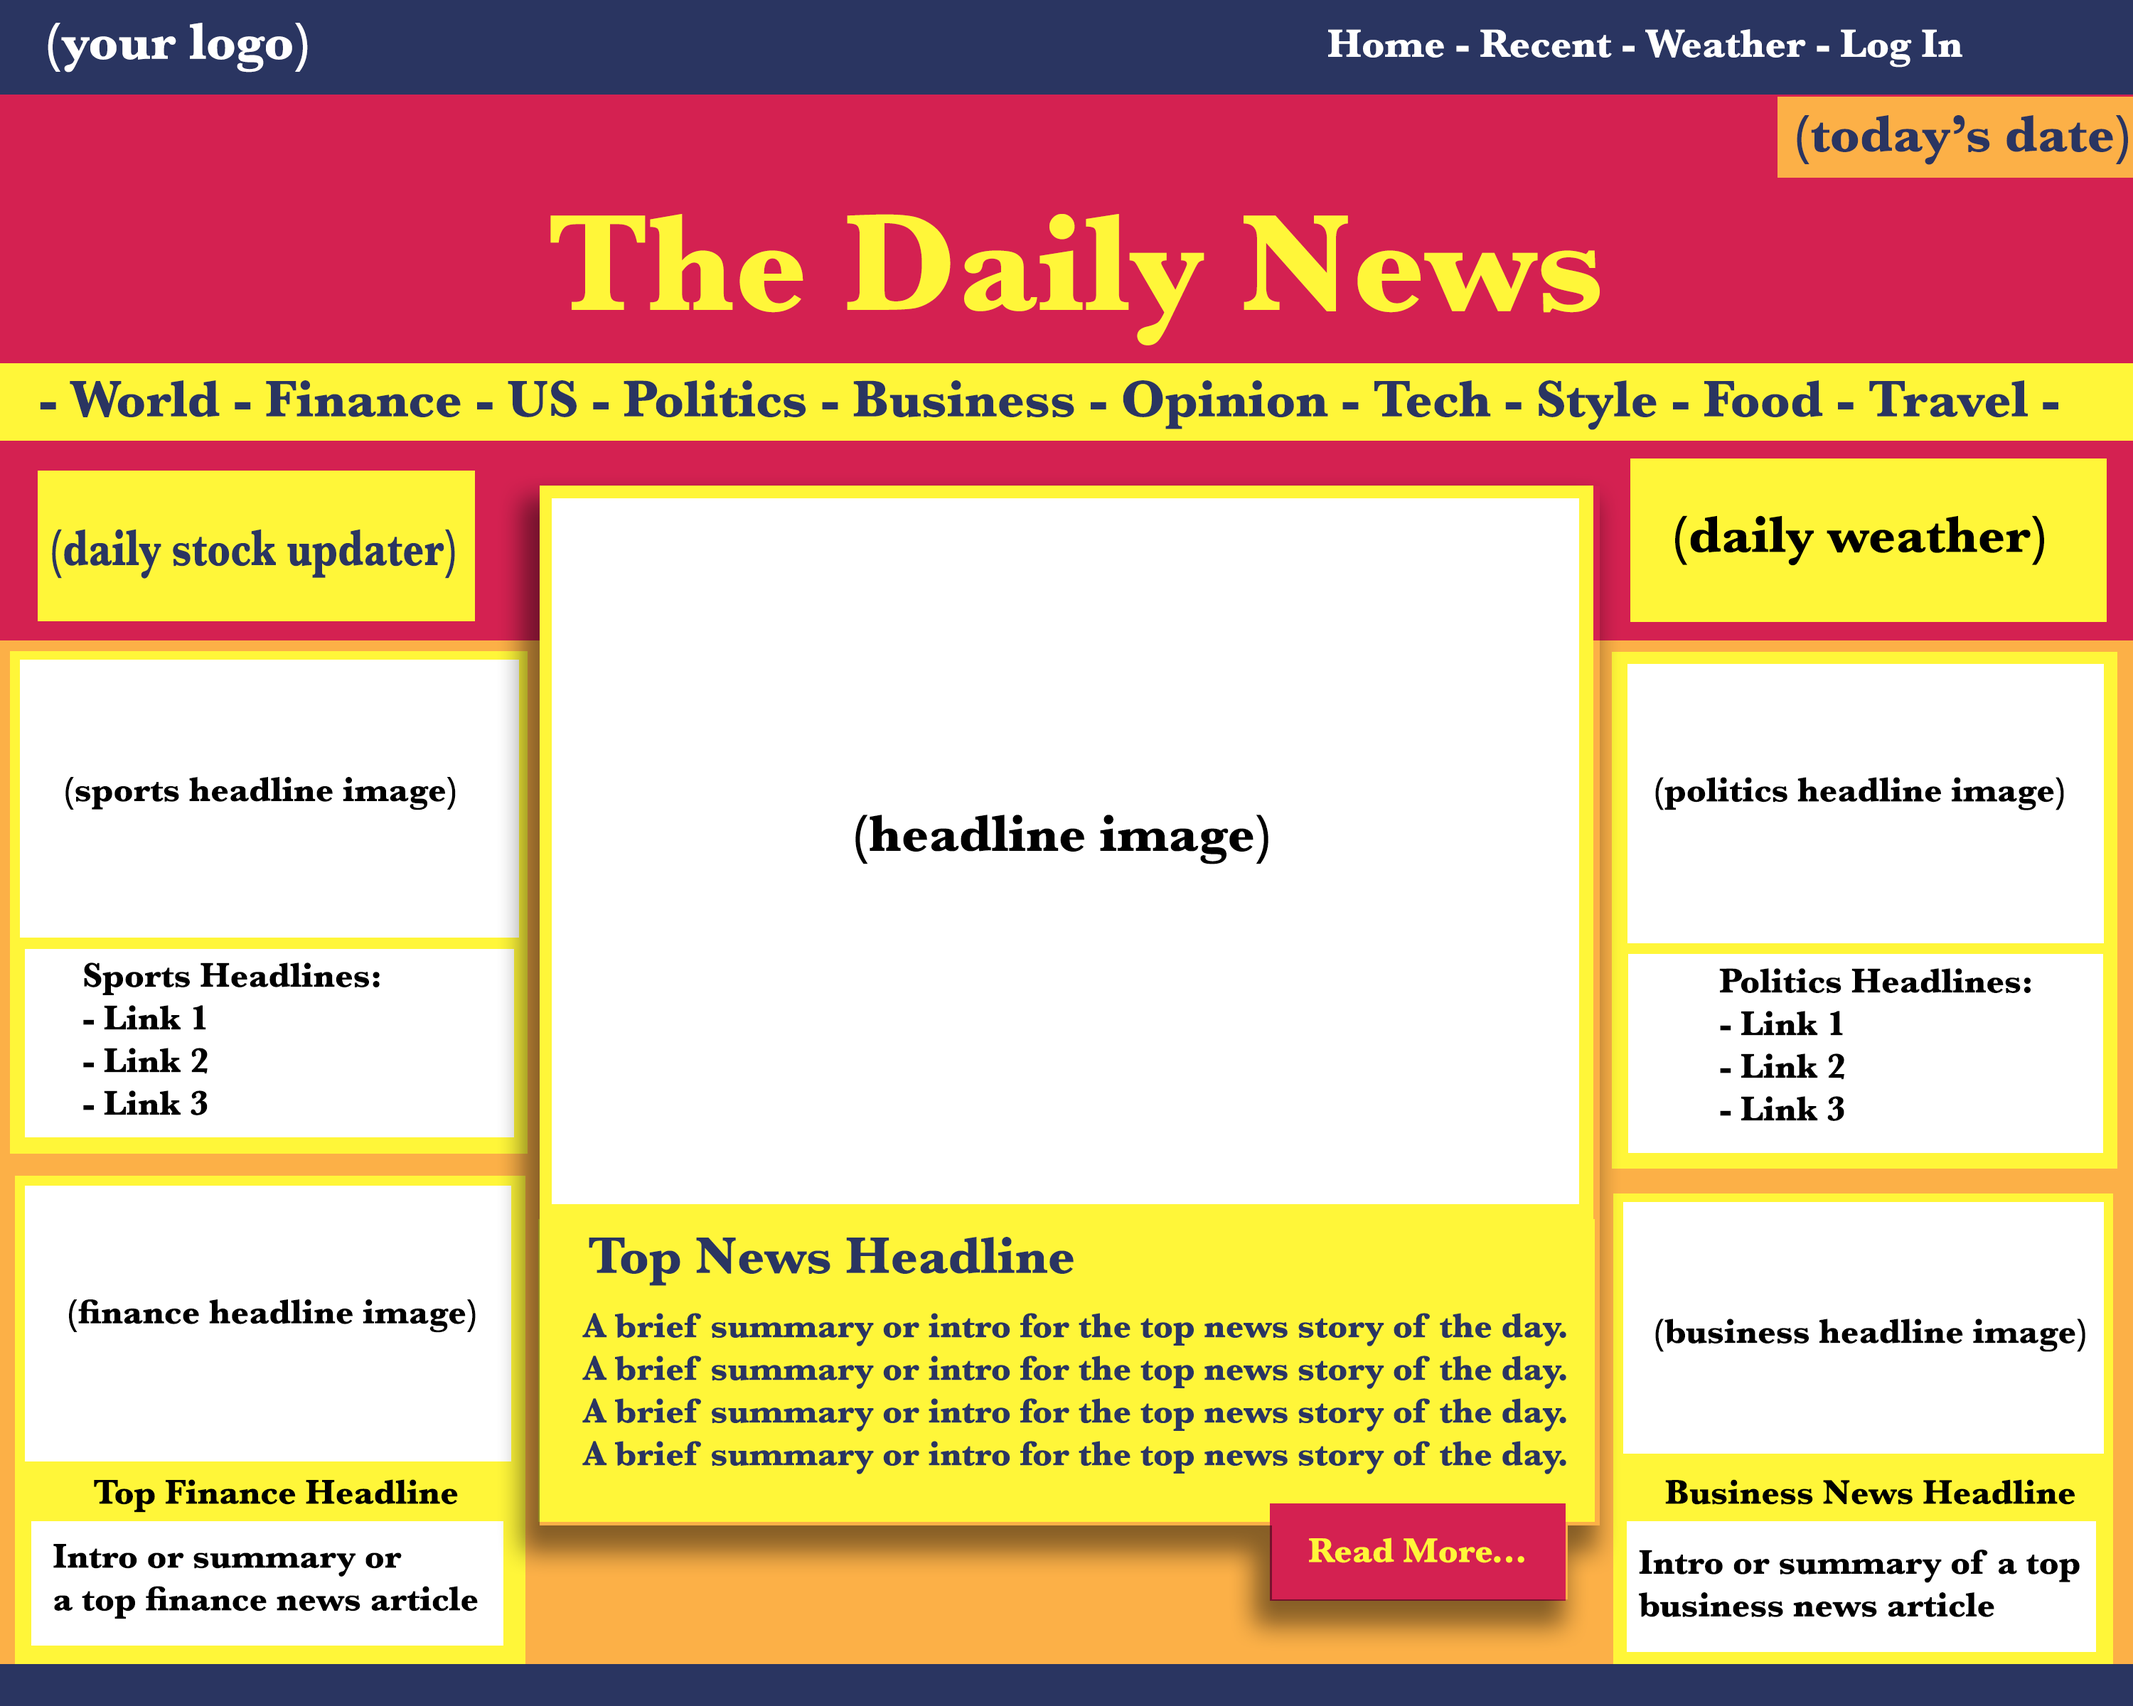
<style>
.page{position:relative;width:2133px;height:1706px;background:#ffffff}
.page>*{position:absolute;margin:0}
.t1{font:53.3px "Baskerville-Bold";color:#ffffff}
.t2{font:40.9px "Baskerville-Bold";color:#ffffff}
.t3{font:53.3px "Baskerville-Bold";color:#2a3561}
.t4{font:142.2px "Baskerville-Bold";color:#fff639}
.t5{font:53.3px "Baskerville-Bold";color:#000000}
.t6{font:12.7px "Baskerville-Bold";color:#2a3561;scale:0.79 1}
.t7{font:8.5px "Baskerville-Bold";color:#000000}
.t8{font:35.5px "Baskerville-Bold";color:#2a3561}
.t9{font:8.5px "Baskerville-Bold";color:#fff639}
</style>
<div class="page">
<p class="t1" style="left:48px;top:23px;width:260px;height:50px">(your logo)</p>
<p class="t2" style="left:1328px;top:29px;width:634px;height:39px">Home - Recent - Weather - Log In</p>
<p class="t3" style="left:1796px;top:115px;width:332px;height:50px">(today’s date)</p>
<p class="t4" style="left:550px;top:214px;width:1049px;height:131px">The Daily News</p>
<p class="t3" style="left:40px;top:380px;width:2018px;height:50px">- World - Finance - US - Politics - Business - Opinion - Tech - Style - Food - Travel -</p>
<p class="t5" style="left:1675px;top:515px;width:369px;height:51px">(daily weather)</p>
<p class="t6" style="left:52px;top:529px;width:403px;height:50px">(daily stock updater)</p>
<p class="t7" style="left:65px;top:777px;width:391px;height:33px">(sports headline image)</p>
<p class="t7" style="left:1655px;top:777px;width:409px;height:33px">(politics headline image)</p>
<p class="t5" style="left:855px;top:815px;width:413px;height:49px">(headline image)</p>
<p class="t7" style="left:83px;top:962px;width:297px;height:153px">Sports Headlines:<br>- Link 1<br>- Link 2<br>- Link 3</p>
<p class="t7" style="left:1719px;top:968px;width:311px;height:153px">Politics Headlines:<br>- Link 1<br>- Link 2<br>- Link 3</p>
<p class="t3" style="left:589px;top:1237px;width:484px;height:49px">Top News Headline</p>
<p class="t7" style="left:69px;top:1299px;width:407px;height:34px">(finance headline image)</p>
<p class="t8" style="left:582px;top:1313px;width:984px;height:161px">A brief summary or intro for the top news story of the day.<br>A brief summary or intro for the top news story of the day.<br>A brief summary or intro for the top news story of the day.<br>A brief summary or intro for the top news story of the day.</p>
<p class="t7" style="left:1655px;top:1319px;width:430px;height:33px">(business headline image)</p>
<p class="t7" style="left:94px;top:1479px;width:364px;height:34px">Top Finance Headline</p>
<p class="t7" style="left:1665px;top:1479px;width:409px;height:26px">Business News Headline</p>
<p class="t9" style="left:1309px;top:1538px;width:215px;height:25px">Read More...</p>
<p class="t7" style="left:53px;top:1544px;width:425px;height:75px">Intro or summary or<br>a top finance news article</p>
<p class="t7" style="left:1638px;top:1550px;width:441px;height:67px">Intro or summary of a top<br>business news article</p>
</div>
